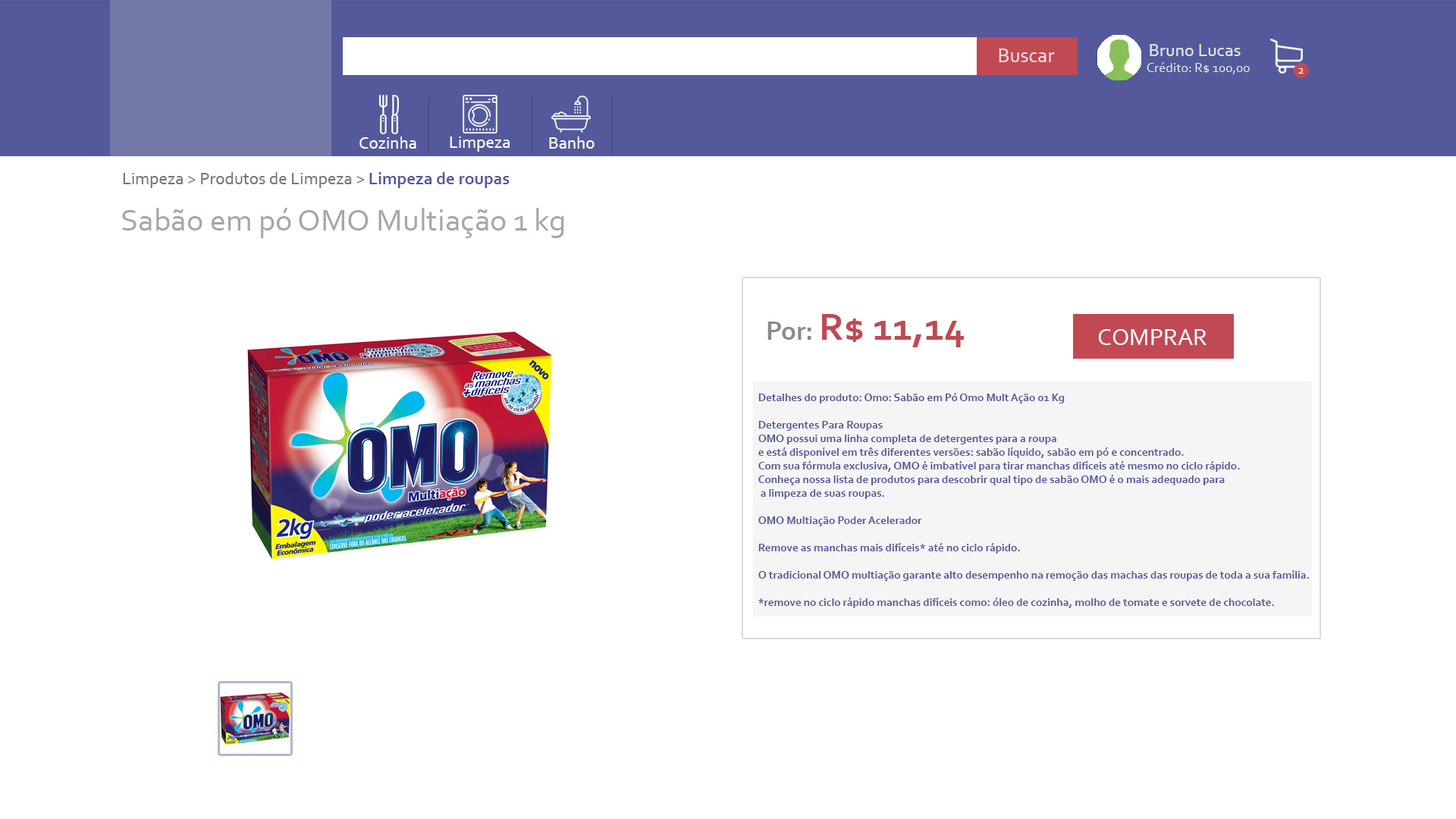
<style>
.page{position:relative;width:1456px;height:819px;background:#ffffff}
.page>*{position:absolute;margin:0}
.t1{font:20.5px "Corbel";color:#f2dedf}
.t2{font:18.2px "Corbel";color:#e1e2eb}
.t3{font:13.6px "Corbel";color:#e1e2eb}
.t4{font:12.1px "Corbel";color:#ffffff}
.t5{font:17.4px "Corbel";color:#ffffff}
.t6{font:17.4px "Corbel";color:#787474}
.t7{font:17.4px "Corbel-Bold";color:#53599a}
.t8{font:31.8px "Corbel";color:#aba4a4}
.t9{font:39.4px "Corbel-Bold";color:#c14953}
.t10{font:27.3px "Corbel-Bold";color:#8d8888}
.t11{font:24.3px "Corbel";color:#ffffff}
.t12{font:11.4px "Corbel-Bold";color:#53599a}
</style>
<div class="page">
<p class="t1" style="left:999px;top:49px;width:56px;height:13px">Buscar</p>
<p class="t2" style="left:1150px;top:44px;width:91px;height:12px">Bruno Lucas</p>
<p class="t3" style="left:1147px;top:62px;width:103px;height:12px">Crédito: R$ 100,00</p>
<p class="t4" style="left:1298px;top:68px;width:6px;height:6px">2</p>
<p class="t5" style="left:359px;top:136px;width:57px;height:13px">Cozinha</p>
<p class="t5" style="left:450px;top:136px;width:60px;height:16px">Limpeza</p>
<p class="t5" style="left:549px;top:136px;width:46px;height:13px">Banho</p>
<p class="t6" style="left:123px;top:172px;width:387px;height:16px">Limpeza &gt; Produtos de Limpeza &gt; <span class="t7">Limpeza de roupas</span></p>
<p class="t8" style="left:122px;top:208px;width:442px;height:30px">Sabão em pó OMO Multiação 1 kg</p>
<p class="t9" style="left:767px;top:314px;width:197px;height:33px"><span class="t10">Por: </span>R$ 11,14</p>
<p class="t11" style="left:1098px;top:329px;width:108px;height:16px">COMPRAR</p>
<p class="t12" style="left:758px;top:393px;width:551px;height:215px">Detalhes do produto: Omo: Sabão em Pó Omo Mult Ação 01 Kg<br><br>Detergentes Para Roupas <br>OMO possui uma linha completa de detergentes para a roupa <br>e está disponível em três diferentes versões: sabão líquido, sabão em pó e concentrado. <br>Com sua fórmula exclusiva, OMO é imbatível para tirar manchas difíceis até mesmo no ciclo rápido. <br>Conheça nossa lista de produtos para descobrir qual tipo de sabão OMO é o mais adequado para<br> a limpeza de suas roupas.<br><br>OMO Multiação Poder Acelerador<br><br>Remove as manchas mais difíceis* até no ciclo rápido.<br><br>O tradicional OMO multiação garante alto desempenho na remoção das machas das roupas de toda a sua família.<br><br>*remove no ciclo rápido manchas difíceis como: óleo de cozinha, molho de tomate e sorvete de chocolate.</p>
</div>
